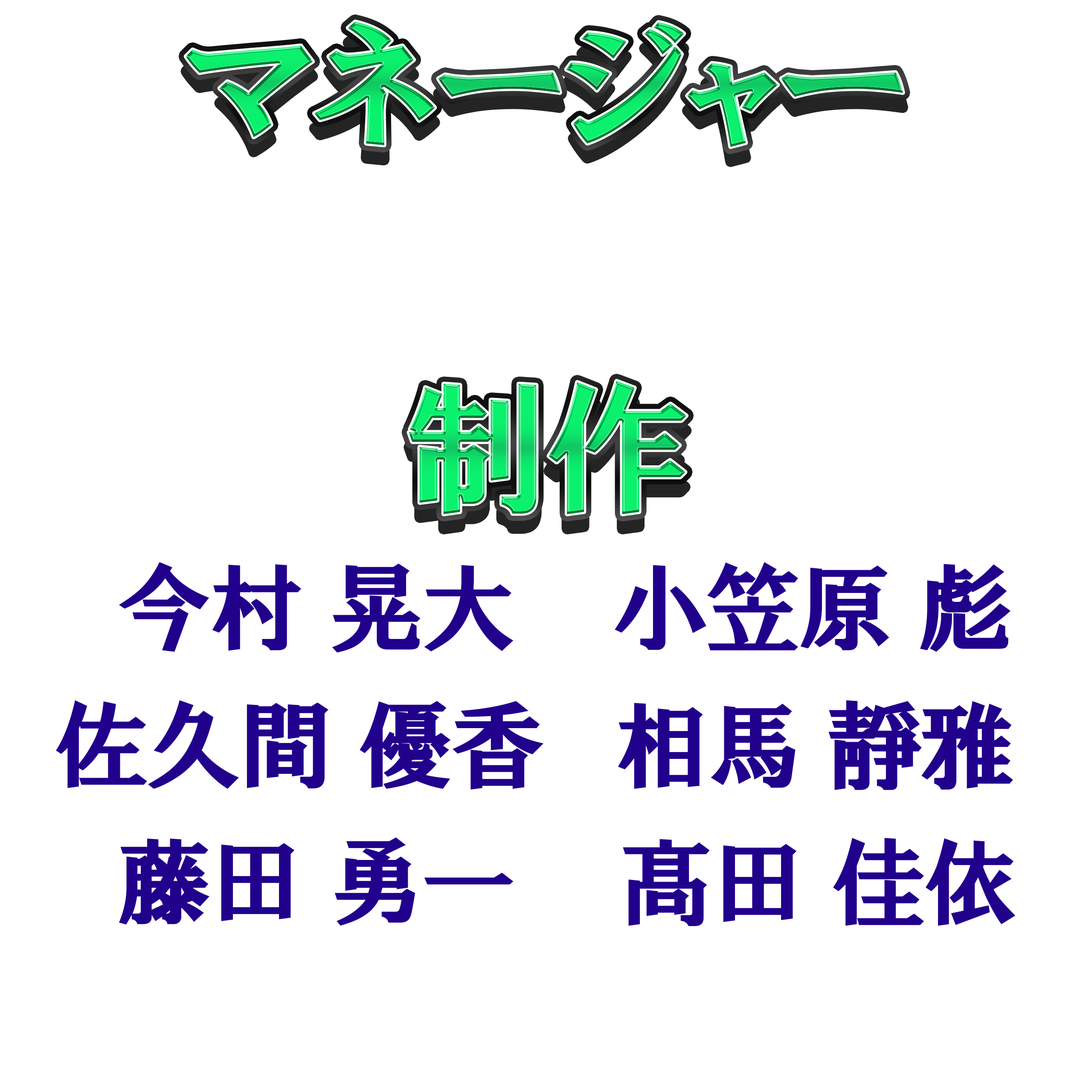
<style>
.page{position:relative;width:1092px;height:1092px;background:#ffffff}
.page>*{position:absolute;margin:0}
.t1{font:145.7px "HGPSoeiPresenceEB";letter-spacing:-0.04em}
.t2{font:96px "HGPSoeiPresenceEB";letter-spacing:-0.04em;color:#21008c}
</style>
<div class="page">
<p class="t1" style="left:186px;top:21px;width:717px;height:126px">マネージャー</p>
<p class="t1" style="left:409px;top:381px;width:278px;height:133px">制作</p>
<p class="t2" style="left:119px;top:562px;width:395px;height:91px">今村 晃大</p>
<p class="t2" style="left:615px;top:562px;width:396px;height:90px">小笠原 彪</p>
<p class="t2" style="left:56px;top:700px;width:487px;height:90px">佐久間 優香</p>
<p class="t2" style="left:618px;top:700px;width:395px;height:90px">相馬 靜雅</p>
<p class="t2" style="left:119px;top:837px;width:395px;height:89px">藤田 勇一</p>
<p class="t2" style="left:623px;top:838px;width:393px;height:88px">髙田 佳依</p>
</div>
